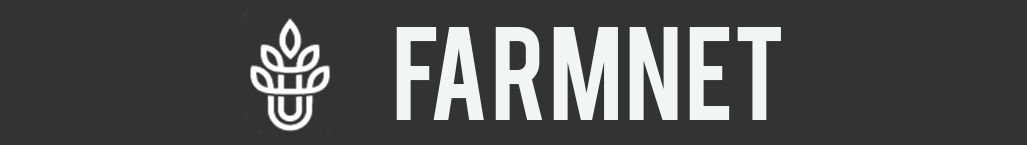
<style>
.page{position:relative;width:1027px;height:145px;background:#333333}
.page>*{position:absolute;margin:0}
.t1{font:102.6px "Bebas";color:#f2f5f3}
</style>
<div class="page">
<p class="t1" style="left:396px;top:27px;width:385px;height:93px">FARMNET</p>
</div>
